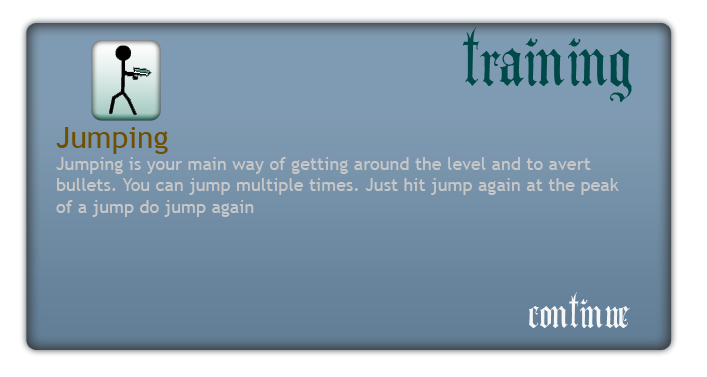
<style>
.page{position:relative;width:707px;height:377px}
.page>*{position:absolute;margin:0}
.t1{font:100px "AngloText";color:#004948}
.t2{font:18px "TrebuchetMS";color:#c7c7c7}
.t3{font:30px "TrebuchetMS";color:#6f4f01}
.t4{font:60px "AngloText";color:#f6f6f6}
</style>
<div class="page">
<p class="t1" style="left:463px;top:27px;width:169px;height:75px">training</p>
<p class="t2" style="left:56px;top:127px;width:563px;height:90px"><span class="t3">Jumping<br></span>Jumping is your main way of getting around the level and to avert<br>bullets. You can jump multiple times. Just hit jump again at the peak<br>of a jump do jump again</p>
<p class="t4" style="left:529px;top:292px;width:101px;height:36px">continue</p>
</div>
